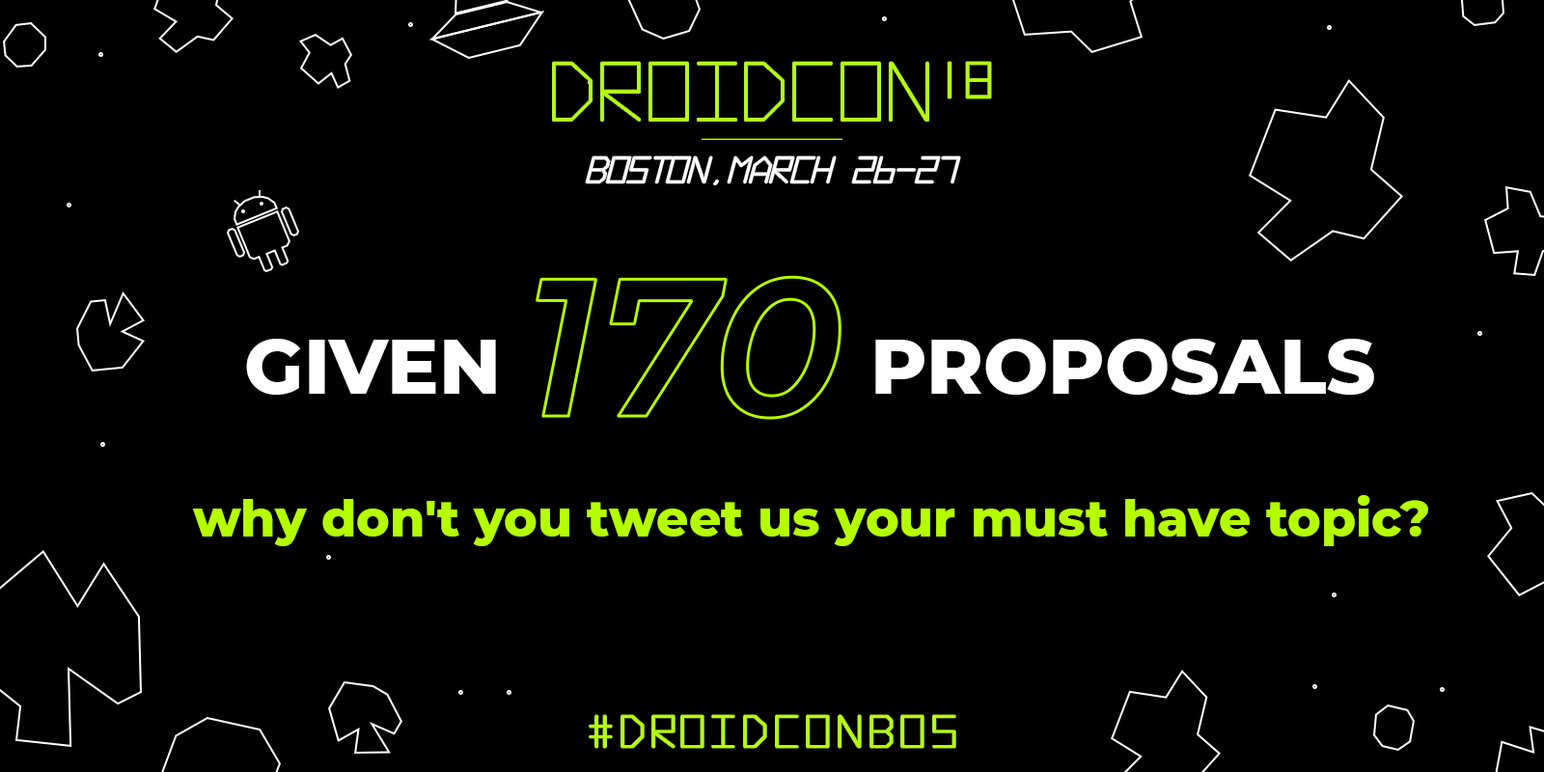
<style>
.page{position:relative;width:1544px;height:772px;background:#000000}
.page>*{position:absolute;margin:0}
.t1{font:76.8px "Montserrat-ExtraBold";color:#ffffff}
.t2{font:50.3px "Montserrat-ExtraBold";color:#b4ff00}
.t3{font:42.8px "Hyperspace";letter-spacing:0.1em;color:#b4ff00;font-weight:bold}
</style>
<div class="page">
<p class="t1" style="left:246px;top:339px;width:250px;height:56px">GIVEN</p>
<p class="t1" style="left:875px;top:339px;width:499px;height:56px">PROPOSALS</p>
<p class="t2" style="left:192px;top:495px;width:1236px;height:51px">why don't you tweet us your must have topic?</p>
<p class="t3" style="left:590px;top:715px;width:366px;height:33px">#DroidconBos</p>
</div>
